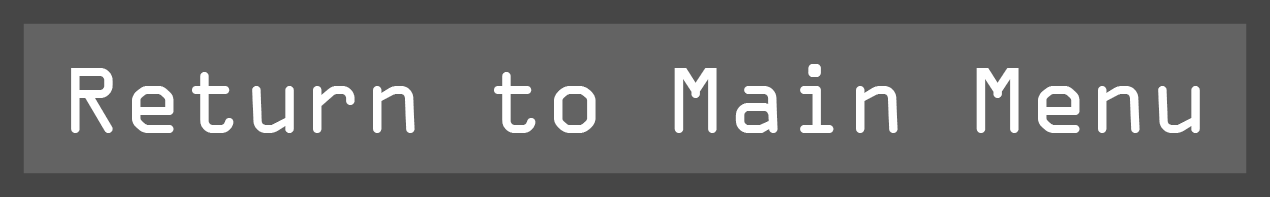
<style>
.page{position:relative;width:1270px;height:197px;background:#636363}
.page>*{position:absolute;margin:0}
.t1{font:100px "OCRAExtended";color:#ffffff}
</style>
<div class="page">
<p class="t1" style="left:71px;top:64px;width:1129px;height:69px">Return to Main Menu</p>
</div>
